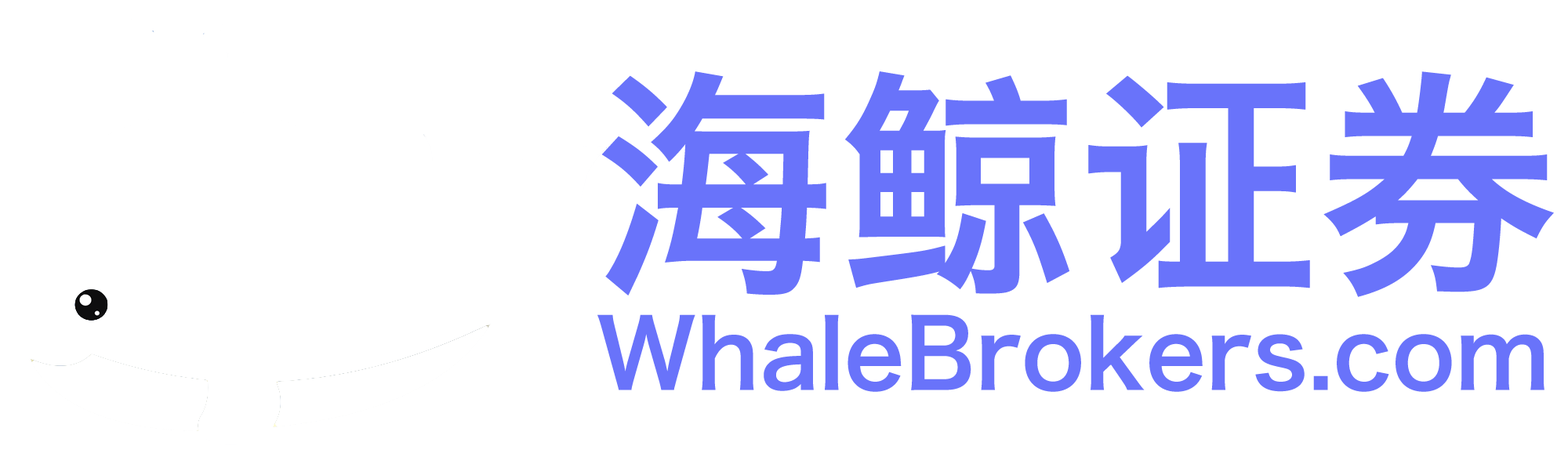
<style>
.page{position:relative;width:1568px;height:475px;background:#ffffff}
.page>*{position:absolute;margin:0}
.t1{font:94.1px "HiraginoSansGB-W6";color:#6973fa}
.t2{font:240.4px "HiraginoSansGB-W6";color:#6973fa}
</style>
<div class="page">
<p class="t1" style="left:597px;top:71px;width:957px;height:321px"><span class="t2">海鲸证券<br></span>WhaleBrokers.com</p>
</div>
